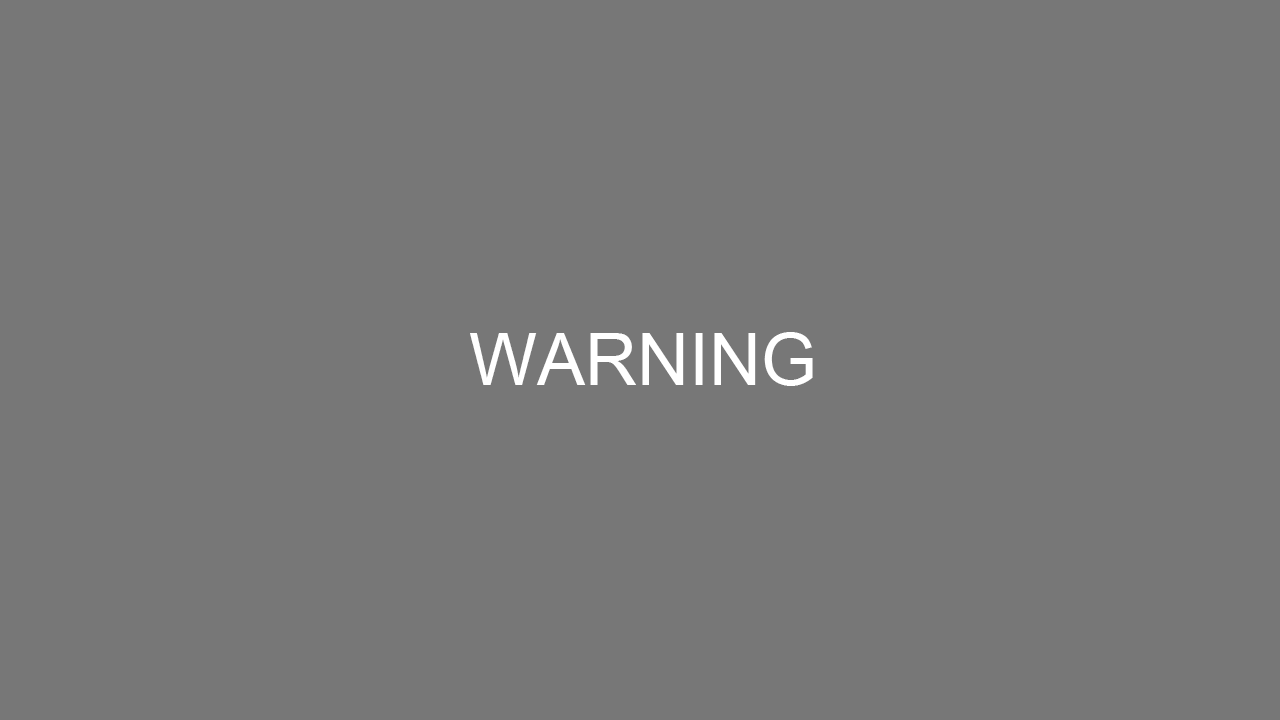
<style>
.page{position:relative;width:1280px;height:720px;background:#777777}
.page>*{position:absolute;margin:0}
.t1{font:72px "ArialMT";color:#ffffff}
</style>
<div class="page">
<p class="t1" style="left:470px;top:332px;width:343px;height:54px">WARNING</p>
</div>
